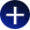
<style>
.page{position:relative;width:30px;height:30px}
.page>*{position:absolute;margin:0}
.t1{font:36px "MinionPro-Medium";color:#fbfcff}
</style>
<div class="page">
<p class="t1" style="left:6px;top:7px;width:18px;height:17px">+</p>
</div>
